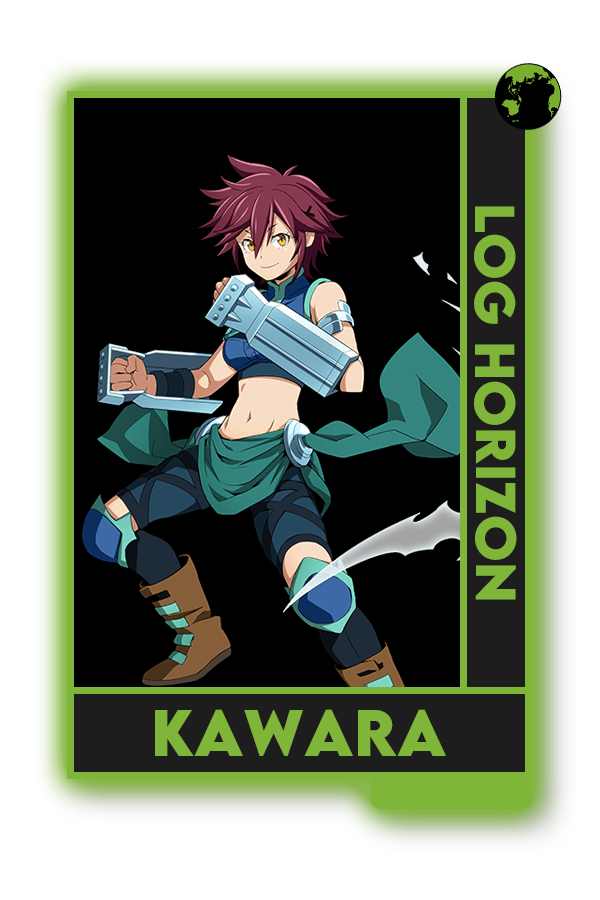
<style>
.page{position:relative;width:600px;height:900px;background:#000000}
.page>*{position:absolute;margin:0}
.t1{font:50px "LEMONMILK-Bold";color:#7fad41}
.t2{font:58.3px "LEMONMILK-Bold";color:#7fad41}
</style>
<div class="page">
<p class="t1" style="left:474px;top:206px;width:43px;height:394px;rotate:90deg">Log Horizon</p>
<p class="t2" style="left:155px;top:709px;width:291px;height:47px">Kawara</p>
</div>
